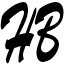
<style>
.page{position:relative;width:64px;height:64px;background:#ffffff}
.page>*{position:absolute;margin:0}
.t1{font:84.8px "BrushScriptStd";color:#000000;scale:0.46 1}
</style>
<div class="page">
<p class="t1" style="left:0px;top:2px;width:64px;height:62px">HB</p>
</div>
